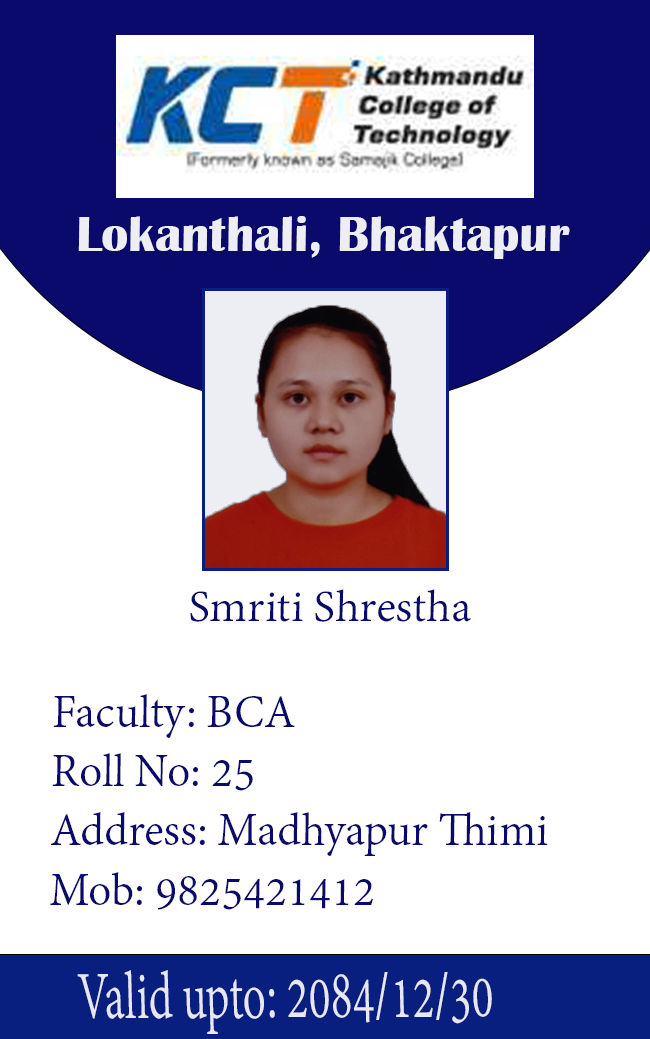
<style>
.page{position:relative;width:650px;height:1039px;background:#ffffff}
.page>*{position:absolute;margin:0}
.t1{font:50.6px "BritannicBold";color:#eceef4}
.t2{font:50.6px "BritannicBold";color:#0a096c}
.t3{font:48.1px "AdobeDevanagari-Regular";color:#0a096c}
.t4{font:49.4px "AdobeDevanagari-Regular";color:#0a096c}
.t5{font:72.9px "AdobeDevanagari-Regular";color:#e7e7f4;scale:0.67 1}
</style>
<div class="page">
<p class="t1" style="left:78px;top:216px;width:518px;height:43px">Lokanthali, Bhaktapur<span class="t2">u</span></p>
<p class="t3" style="left:190px;top:589px;width:281px;height:33px">Smriti Shrestha</p>
<p class="t4" style="left:50px;top:694px;width:498px;height:216px">Faculty: BCA<br>Roll No: 25<br>Address: Madhyapur Thimi<br>Mob: 9825421412</p>
<p class="t5" style="left:77px;top:970px;width:415px;height:64px">Valid upto: 2084/12/30</p>
</div>
